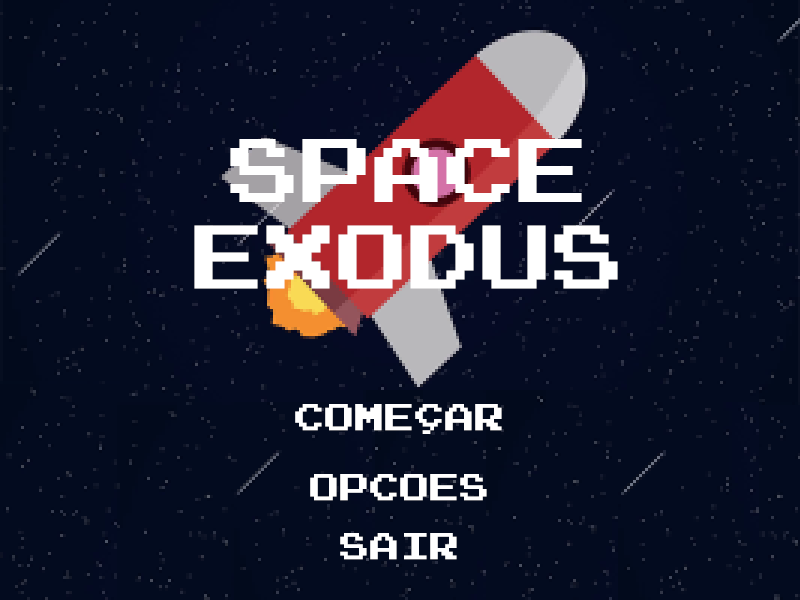
<style>
.page{position:relative;width:800px;height:600px;background:#030b1f}
.page>*{position:absolute;margin:0}
.t1{font:72px "PressStart2P";color:#ffffff}
.t2{font:30px "PressStart2P";color:#ffffff}
</style>
<div class="page">
<p class="t1" style="left:194px;top:139px;width:424px;height:150px;text-align:center">SPACE<br>EXODUS</p>
<p class="t2" style="left:295px;top:404px;width:207px;height:30px">COMEÇAR</p>
<p class="t2" style="left:310px;top:474px;width:177px;height:27px">OPCOES</p>
<p class="t2" style="left:340px;top:533px;width:117px;height:27px">SAIR</p>
</div>
